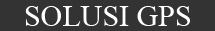
<style>
.page{position:relative;width:215px;height:31px;background:#333333}
.page>*{position:absolute;margin:0}
.t1{font:30px "TimesNewRomanPSMT";color:#ffffff}
</style>
<div class="page">
<p class="t1" style="left:25px;top:6px;width:165px;height:20px">SOLUSI GPS</p>
</div>
